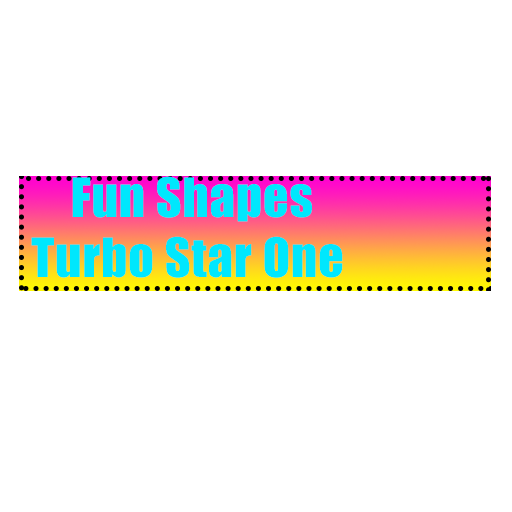
<style>
.page{position:relative;width:512px;height:512px;background:#ffffff}
.page>*{position:absolute;margin:0}
.t1{font:50px "Impact";letter-spacing:0.02em;color:#00e7fd}
</style>
<div class="page">
<p class="t1" style="left:31px;top:176px;width:312px;height:102px;text-align:center">Fun Shapes <br>Turbo Star One</p>
</div>
